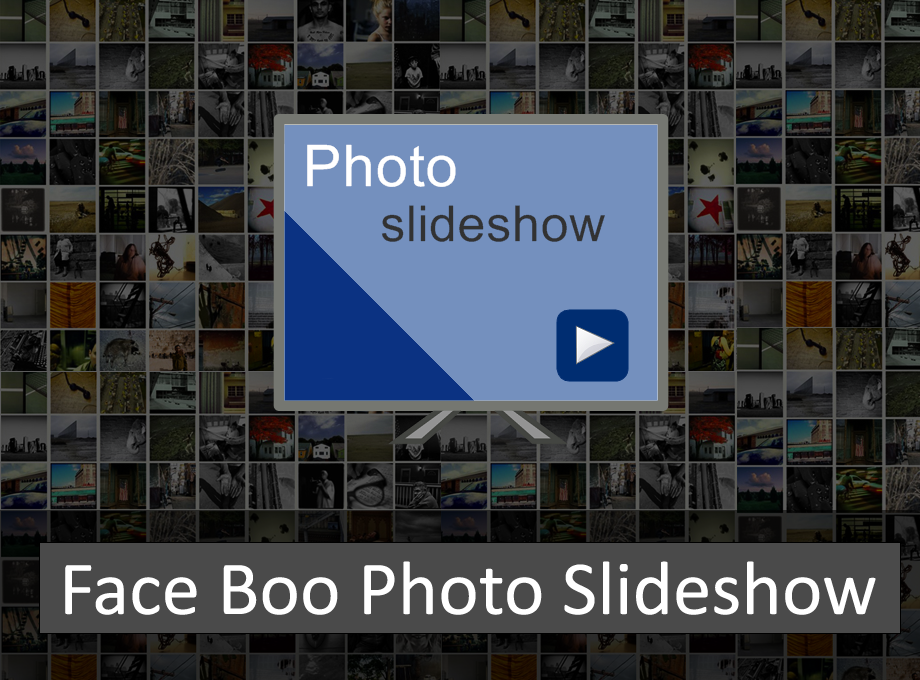
<style>
.page{position:relative;width:920px;height:680px}
.page>*{position:absolute;margin:0}
.t1{font:77px "Calibri";color:#ffffff}
</style>
<div class="page">
<p class="t1" style="left:65px;top:561px;width:811px;height:54px">Face Boo Photo Slideshow</p>
</div>
